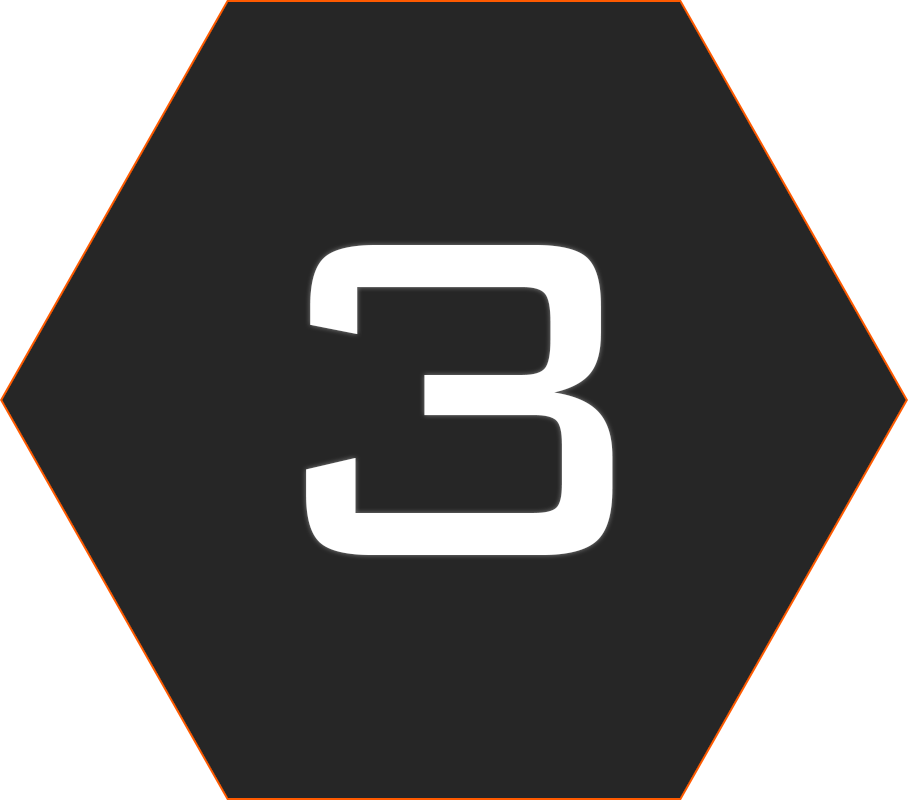
<style>
.page{position:relative;width:908px;height:800px;background:#262626}
.page>*{position:absolute;margin:0}
.t1{font:600px "BankGothicBT-Light";color:#ffffff}
</style>
<div class="page">
<p class="t1" style="left:306px;top:245px;width:307px;height:310px">3</p>
</div>
